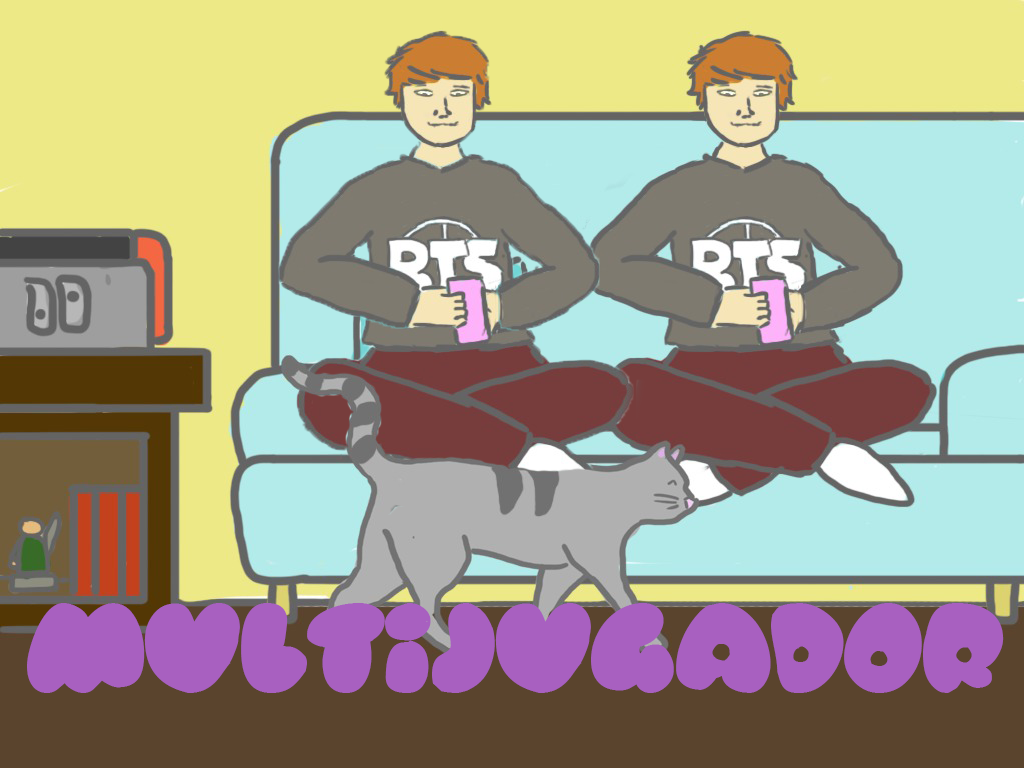
<style>
.page{position:relative;width:1024px;height:768px}
.page>*{position:absolute;margin:0}
.t1{font:90px "Rubberneck";color:#a860c0}
</style>
<div class="page">
<p class="t1" style="left:27px;top:603px;width:977px;height:90px">Multijugador</p>
</div>
